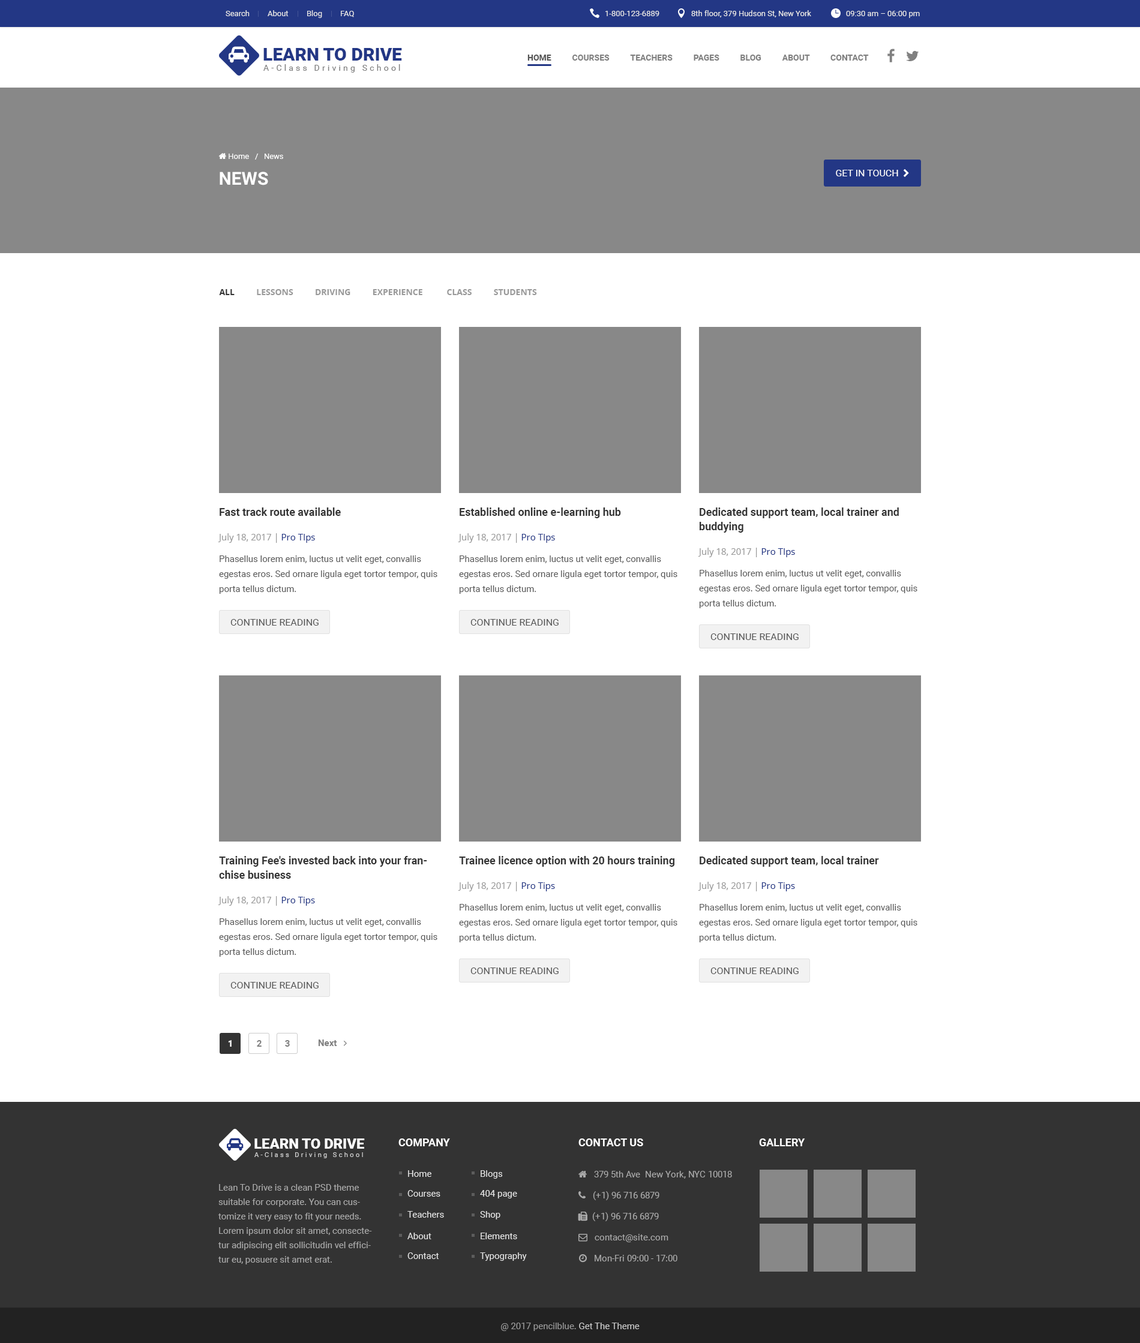
<style>
.page{position:relative;width:1140px;height:1343px;background:#ffffff}
.page>*{position:absolute;margin:0}
.t1{font:7.8px "Roboto-Regular";color:#e6e6e6}
.t2{font:18px "Roboto-Black";color:#233785;text-transform:uppercase}
.t3{font:8.4px "Roboto-Regular";letter-spacing:0.3em;color:#808080}
.t4{font:8.4px "Roboto-Bold";color:#808080;text-transform:uppercase}
.t5{font:8.4px "Roboto-Bold";color:#555555;text-transform:uppercase}
.t6{font:18px "Roboto-Bold";color:#ffffff;text-transform:uppercase}
.t7{font:8.4px "OpenSans-Bold";color:#999999;text-transform:uppercase}
.t8{font:8.4px "OpenSans-Bold";color:#333333;text-transform:uppercase}
.t9{font:10.8px "Roboto-Bold";color:#333333}
.t10{font:10.8px/14.4px "Roboto-Bold";color:#333333}
.t11{font:9px "OpenSans";color:#999999}
.t12{font:9px "OpenSans";color:#233785}
.t13{font:9px/15px "Roboto-Regular";color:#555555}
.t14{font:9.6px "Roboto-Regular";color:#555555;text-transform:uppercase}
.t15{font:9px "Roboto-Bold";color:#ffffff}
.t16{font:9px "Roboto-Bold";color:#808080}
.t17{font:14.3px "Roboto-Black";color:#ffffff;text-transform:uppercase}
.t18{font:10.8px "Roboto-Bold";color:#ffffff;text-transform:uppercase}
.t19{font:6.7px "Roboto-Regular";letter-spacing:0.3em;color:#cccccc}
.t20{font:9px "Roboto-Regular";color:#e6e6e6}
.t21{font:9px/14.4px "Roboto-Regular";color:#aaaaaa}
.t22{font:9px "Roboto-Regular";color:#999999}
.t23{font:9px "Roboto-Regular";color:#cccccc}
</style>
<div class="page">
<p class="t1" style="left:226px;top:10px;width:24px;height:6px">Search</p>
<p class="t1" style="left:268px;top:10px;width:21px;height:6px">About</p>
<p class="t1" style="left:307px;top:10px;width:15px;height:8px">Blog</p>
<p class="t1" style="left:341px;top:11px;width:13px;height:6px">FAQ</p>
<p class="t1" style="left:605px;top:11px;width:54px;height:5px">1-800-123-6889</p>
<p class="t1" style="left:691px;top:10px;width:120px;height:7px">8th floor, 379 Hudson St, New York</p>
<p class="t1" style="left:846px;top:11px;width:74px;height:7px">09:30 am – 06:00 pm</p>
<p class="t2" style="left:263px;top:48px;width:139px;height:13px">Learn to Drive</p>
<p class="t3" style="left:263px;top:64px;width:137px;height:9px">A-Class Driving School</p>
<p class="t4" style="left:527px;top:55px;width:342px;height:6px"><span class="t5">Home          </span>Courses          Teachers          Pages          Blog          About          Contact</p>
<p class="t6" style="left:220px;top:172px;width:48px;height:13px">News</p>
<p class="t7" style="left:219px;top:289px;width:318px;height:6px"><span class="t8">All</span>          Lessons          Driving          Experience           Class          Students</p>
<p class="t9" style="left:220px;top:508px;width:121px;height:8px">Fast track route available</p>
<p class="t9" style="left:460px;top:508px;width:161px;height:10px">Established online e-learning hub</p>
<p class="t10" style="left:700px;top:508px;width:199px;height:25px">Dedicated support team, local trainer and buddying</p>
<p class="t11" style="left:218px;top:533px;width:97px;height:10px">July 18, 2017 | <span class="t12">Pro TIps</span></p>
<p class="t11" style="left:458px;top:533px;width:97px;height:10px">July 18, 2017 | <span class="t12">Pro TIps</span></p>
<p class="t13" style="left:219px;top:556px;width:218px;height:38px">Phasellus lorem enim, luctus ut velit eget, convallis egestas eros. Sed ornare ligula eget tortor tempor, quis porta tellus dictum.</p>
<p class="t13" style="left:459px;top:556px;width:218px;height:38px">Phasellus lorem enim, luctus ut velit eget, convallis egestas eros. Sed ornare ligula eget tortor tempor, quis porta tellus dictum.</p>
<p class="t11" style="left:698px;top:548px;width:97px;height:9px">July 18, 2017 | <span class="t12">Pro TIps</span></p>
<p class="t13" style="left:699px;top:570px;width:218px;height:38px">Phasellus lorem enim, luctus ut velit eget, convallis egestas eros. Sed ornare ligula eget tortor tempor, quis porta tellus dictum.</p>
<p class="t14" style="left:230px;top:619px;width:89px;height:7px">Continue reading</p>
<p class="t14" style="left:470px;top:619px;width:89px;height:7px">Continue reading</p>
<p class="t14" style="left:710px;top:634px;width:89px;height:6px">Continue reading</p>
<p class="t10" style="left:219px;top:856px;width:208px;height:23px">Training Fee's invested back into your franchise business</p>
<p class="t9" style="left:459px;top:856px;width:215px;height:11px">Trainee licence option with 20 hours training</p>
<p class="t9" style="left:700px;top:856px;width:179px;height:11px">Dedicated support team, local trainer</p>
<p class="t11" style="left:458px;top:882px;width:97px;height:10px">July 18, 2017 | <span class="t12">Pro Tips</span></p>
<p class="t11" style="left:698px;top:882px;width:97px;height:10px">July 18, 2017 | <span class="t12">Pro Tips</span></p>
<p class="t11" style="left:218px;top:896px;width:97px;height:10px">July 18, 2017 | <span class="t12">Pro Tips</span></p>
<p class="t13" style="left:459px;top:904px;width:218px;height:39px">Phasellus lorem enim, luctus ut velit eget, convallis egestas eros. Sed ornare ligula eget tortor tempor, quis porta tellus dictum.</p>
<p class="t13" style="left:699px;top:904px;width:218px;height:39px">Phasellus lorem enim, luctus ut velit eget, convallis egestas eros. Sed ornare ligula eget tortor tempor, quis porta tellus dictum.</p>
<p class="t13" style="left:219px;top:919px;width:218px;height:38px">Phasellus lorem enim, luctus ut velit eget, convallis egestas eros. Sed ornare ligula eget tortor tempor, quis porta tellus dictum.</p>
<p class="t14" style="left:470px;top:968px;width:89px;height:6px">Continue reading</p>
<p class="t14" style="left:710px;top:968px;width:89px;height:6px">Continue reading</p>
<p class="t14" style="left:230px;top:982px;width:89px;height:7px">Continue reading</p>
<p class="t15" style="left:228px;top:1040px;width:4px;height:7px">1</p>
<p class="t16" style="left:257px;top:1040px;width:5px;height:7px">2</p>
<p class="t16" style="left:285px;top:1040px;width:5px;height:7px">3</p>
<p class="t17" style="left:254px;top:1139px;width:111px;height:10px">Learn to Drive</p>
<p class="t18" style="left:398px;top:1139px;width:52px;height:8px">Company</p>
<p class="t18" style="left:578px;top:1139px;width:65px;height:8px">Contact us</p>
<p class="t18" style="left:759px;top:1139px;width:46px;height:8px">Gallery</p>
<p class="t19" style="left:254px;top:1153px;width:109px;height:6px">A-Class Driving School</p>
<p class="t20" style="left:408px;top:1171px;width:23px;height:6px">Home</p>
<p class="t20" style="left:481px;top:1171px;width:22px;height:8px">Blogs</p>
<p class="t21" style="left:218px;top:1184px;width:154px;height:81px">Lean To Drive is a clean PSD theme suitable for corporate. You can customize it very easy to fit your needs. Lorem ipsum dolor sit amet, consectetur adipiscing elit sollicitudin vel efficitur eu, posuere sit amet erat.</p>
<p class="t20" style="left:407px;top:1190px;width:33px;height:7px">Courses</p>
<p class="t20" style="left:480px;top:1190px;width:37px;height:9px">404 page</p>
<p class="t20" style="left:407px;top:1211px;width:37px;height:7px">Teachers</p>
<p class="t20" style="left:480px;top:1211px;width:20px;height:9px">Shop</p>
<p class="t20" style="left:407px;top:1233px;width:24px;height:7px">About</p>
<p class="t20" style="left:481px;top:1233px;width:36px;height:7px">Elements</p>
<p class="t20" style="left:407px;top:1253px;width:32px;height:6px">Contact</p>
<p class="t20" style="left:480px;top:1253px;width:47px;height:8px">Typography</p>
<p class="t22" style="left:501px;top:1323px;width:139px;height:8px">@ 2017 pencilblue. <span class="t23">Get The Theme</span></p>
</div>
